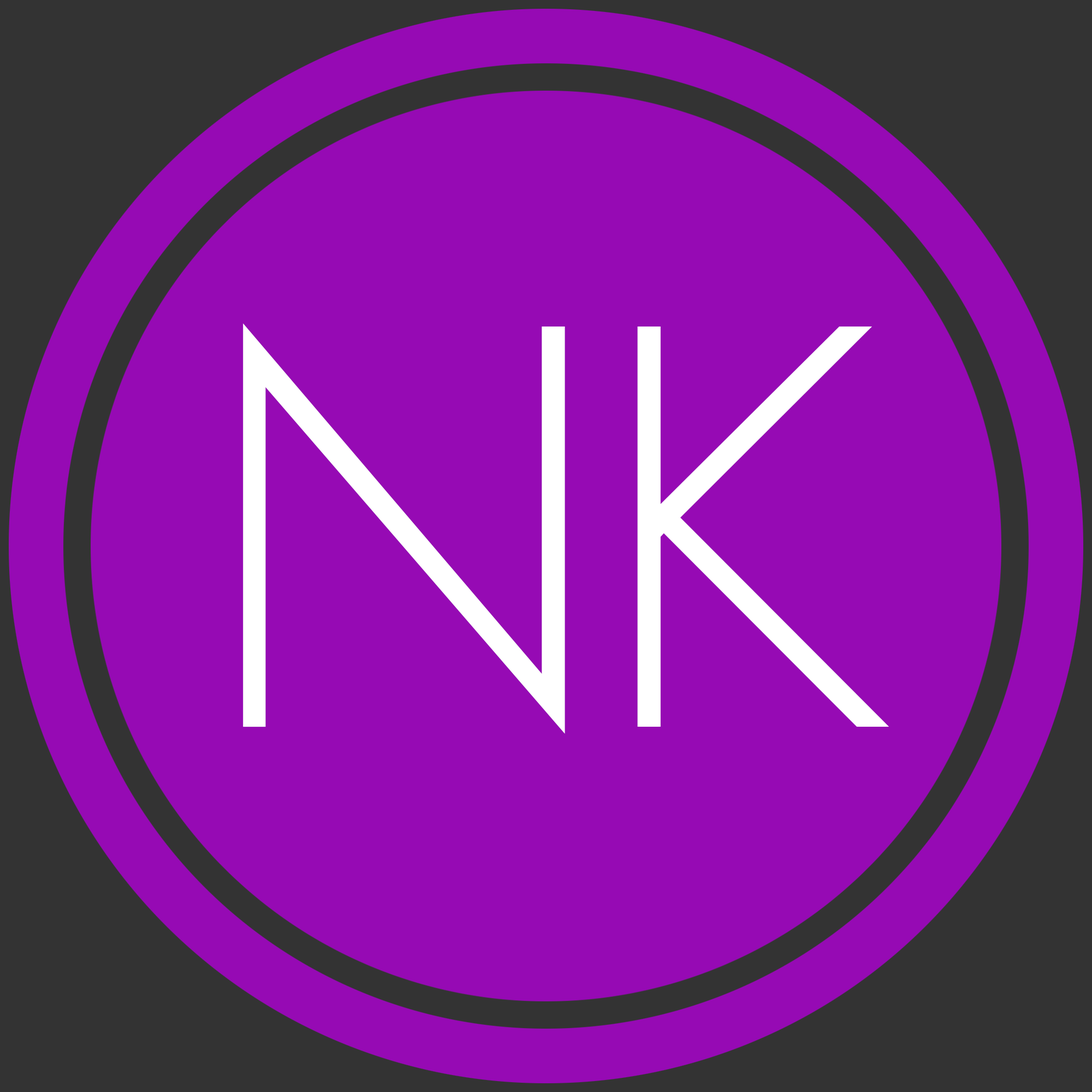
<style>
.page{position:relative;width:1092px;height:1092px;background:#960ab4}
.page>*{position:absolute;margin:0}
.t1{font:560.6px "GeosansLight-NMS";color:#ffffff}
</style>
<div class="page">
<p class="t1" style="left:243px;top:323px;width:646px;height:411px">NK</p>
</div>
